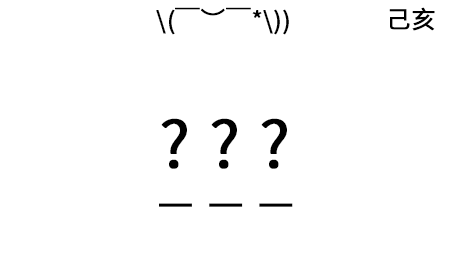
<style>
.page{position:relative;width:450px;height:279px;background:#ffffff}
.page>*{position:absolute;margin:0}
.t1{font:24px "NotoSansCJKsc-DemiLight";letter-spacing:0.02em;color:#000000;font-weight:bold}
.t2{font:64px "NotoSansCJKsc-DemiLight";letter-spacing:0.02em;color:#000000;font-weight:bold;text-decoration:underline}
</style>
<div class="page">
<p class="t1" style="left:156px;top:7px;width:133px;height:28px">\(￣︶￣*\))</p>
<p class="t1" style="left:389px;top:7px;width:46px;height:24px">己亥</p>
<p class="t2" style="left:159px;top:118px;width:134px;height:89px">? ? ?</p>
</div>
